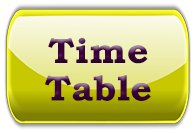
<style>
.page{position:relative;width:195px;height:133px}
.page>*{position:absolute;margin:0}
.t1{font:34.9px/37.6px "BookmanOldStyle-Bold";letter-spacing:0.02em;color:#3a033b;scale:1.07 1}
</style>
<div class="page">
<p class="t1" style="left:44px;top:37px;width:107px;height:64px;text-align:center">Time<br>Table</p>
</div>
